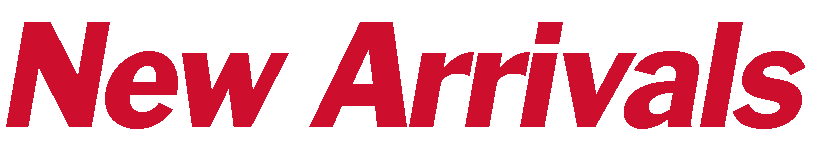
<style>
.page{position:relative;width:819px;height:151px;background:#ffffff}
.page>*{position:absolute;margin:0}
.t1{font:157px "FranklinGothicITALIC";letter-spacing:-0.04em;color:#ce0e2d}
</style>
<div class="page">
<p class="t1" style="left:6px;top:22px;width:799px;height:107px">New Arrivals</p>
</div>
